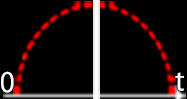
<style>
.page{position:relative;width:187px;height:99px;background:#000000}
.page>*{position:absolute;margin:0}
.t1{font:26.4px "KozGoPr6N-Regular";color:#ffffff}
</style>
<div class="page">
<p class="t1" style="left:1px;top:71px;width:13px;height:22px">0</p>
<p class="t1" style="left:175px;top:72px;width:9px;height:19px">t</p>
</div>
